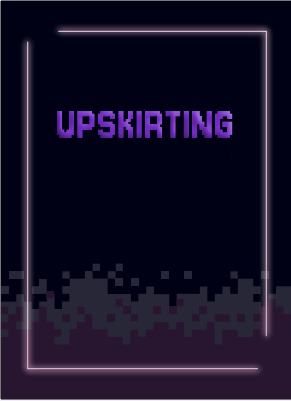
<style>
.page{position:relative;width:291px;height:401px;background:#000115}
.page>*{position:absolute;margin:0}
.t1{font:50px "Jersey10-Regular";letter-spacing:0.025em;scale:0.9 1}
</style>
<div class="page">
<p class="t1" style="left:56px;top:110px;width:177px;height:28px">UPSKIRTING</p>
</div>
